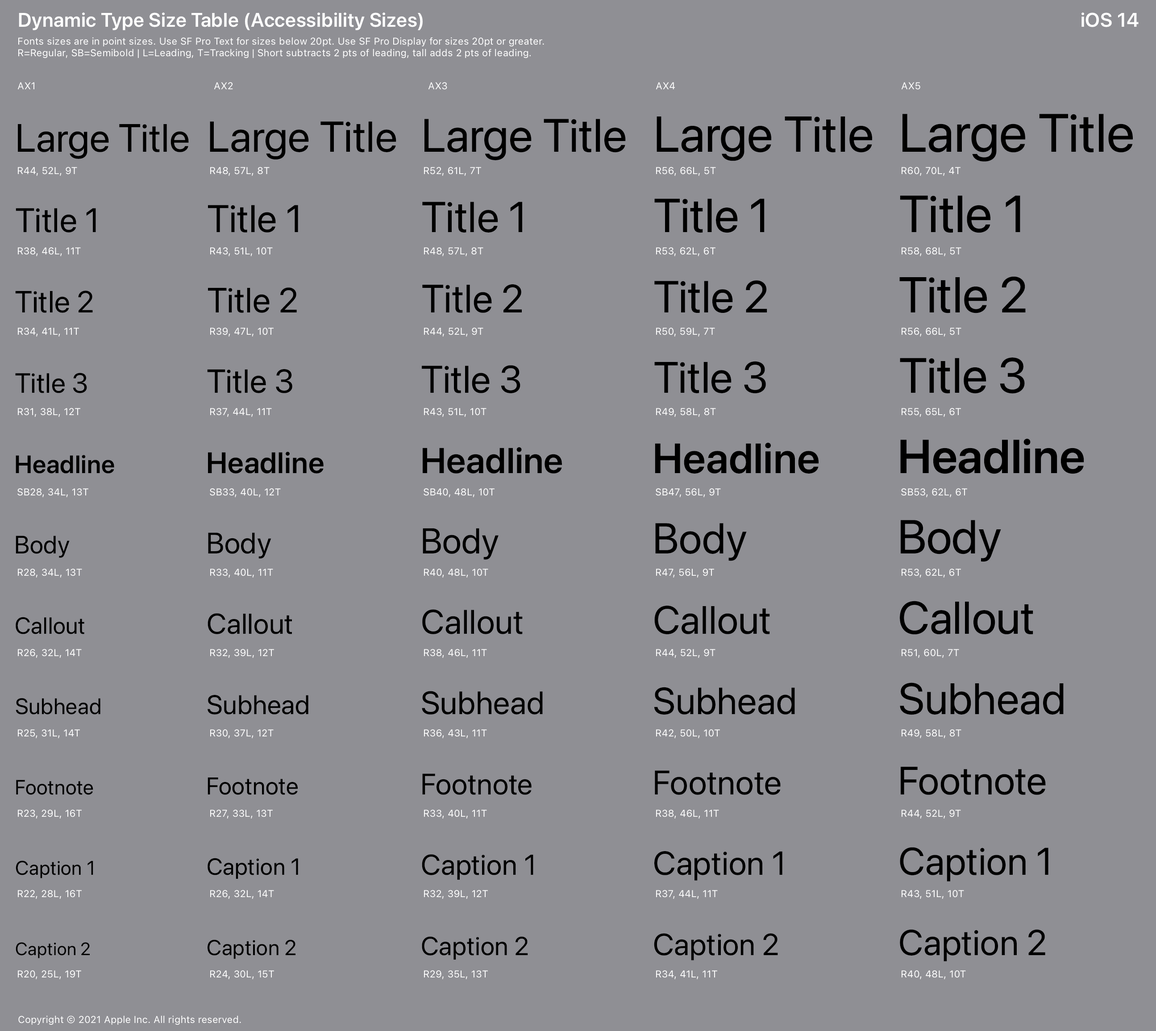
<style>
.page{position:relative;width:1156px;height:1031px;background:#8f8f94}
.page>*{position:absolute;margin:0}
.t1{font:19.6px "SFProDisplay-Semibold";letter-spacing:0.016em;color:#ffffff}
.t2{font:9.8px/11.6px "SFProText-Regular";letter-spacing:0.006em;color:#ffffff}
.t3{font:9.8px "SFProText-Regular";letter-spacing:0.013em;color:#ffffff}
.t4{font:53.6px "SFProDisplay-Regular";letter-spacing:0.004em;color:#000000}
.t5{font:39.3px "SFProDisplay-Regular";letter-spacing:0.009em;color:#000000}
.t6{font:42.9px "SFProDisplay-Regular";letter-spacing:0.008em;color:#000000}
.t7{font:46.4px "SFProDisplay-Regular";letter-spacing:0.007em;color:#000000}
.t8{font:50px "SFProDisplay-Regular";letter-spacing:0.005em;color:#000000}
.t9{font:9.8px/80.4px "SFProText-Regular";letter-spacing:0.006em;color:#ffffff}
.t10{font:51.8px "SFProDisplay-Regular";letter-spacing:0.005em;color:#000000}
.t11{font:33.9px "SFProDisplay-Regular";letter-spacing:0.011em;color:#000000}
.t12{font:38.4px "SFProDisplay-Regular";letter-spacing:0.01em;color:#000000}
.t13{font:47.3px "SFProDisplay-Regular";letter-spacing:0.006em;color:#000000}
.t14{font:44.6px "SFProDisplay-Regular";letter-spacing:0.006em;color:#000000}
.t15{font:30.4px "SFProDisplay-Regular";letter-spacing:0.011em;color:#000000}
.t16{font:34.8px "SFProDisplay-Regular";letter-spacing:0.01em;color:#000000}
.t17{font:43.8px "SFProDisplay-Regular";letter-spacing:0.008em;color:#000000}
.t18{font:49.1px "SFProDisplay-Regular";letter-spacing:0.006em;color:#000000}
.t19{font:27.7px "SFProDisplay-Regular";letter-spacing:0.012em;color:#000000}
.t20{font:33px "SFProDisplay-Regular";letter-spacing:0.011em;color:#000000}
.t21{font:35.7px "SFProDisplay-Semibold";letter-spacing:0.01em;color:#000000}
.t22{font:42px "SFProDisplay-Semibold";letter-spacing:0.009em;color:#000000}
.t23{font:47.3px "SFProDisplay-Semibold";letter-spacing:0.006em;color:#000000}
.t24{font:25px "SFProDisplay-Semibold";letter-spacing:0.013em;color:#000000}
.t25{font:29.5px "SFProDisplay-Semibold";letter-spacing:0.012em;color:#000000}
.t26{font:29.5px "SFProDisplay-Regular";letter-spacing:0.011em;color:#000000}
.t27{font:35.7px "SFProDisplay-Regular";letter-spacing:0.01em;color:#000000}
.t28{font:42.9px "SFProDisplay-Regular";letter-spacing:0.009em;color:#000000}
.t29{font:25px "SFProDisplay-Regular";letter-spacing:0.013em;color:#000000}
.t30{font:45.5px "SFProDisplay-Regular";letter-spacing:0.007em;color:#000000}
.t31{font:23.2px "SFProDisplay-Regular";letter-spacing:0.014em;color:#000000}
.t32{font:28.6px "SFProDisplay-Regular";letter-spacing:0.012em;color:#000000}
.t33{font:37.5px "SFProDisplay-Regular";letter-spacing:0.01em;color:#000000}
.t34{font:22.3px "SFProDisplay-Regular";letter-spacing:0.014em;color:#000000}
.t35{font:26.8px "SFProDisplay-Regular";letter-spacing:0.012em;color:#000000}
.t36{font:32.1px "SFProDisplay-Regular";letter-spacing:0.011em;color:#000000}
.t37{font:20.5px "SFProDisplay-Regular";letter-spacing:0.016em;color:#000000}
.t38{font:24.1px "SFProDisplay-Regular";letter-spacing:0.013em;color:#000000}
.t39{font:19.6px "SFProDisplay-Regular";letter-spacing:0.016em;color:#000000}
.t40{font:21.4px "SFProDisplay-Regular";letter-spacing:0.015em;color:#000000}
.t41{font:25.9px "SFProDisplay-Regular";letter-spacing:0.013em;color:#000000}
.t42{font:17.9px "SFProDisplay-Regular";letter-spacing:0.019em;color:#000000}
.t43{font:9.8px "SFProText-Regular";letter-spacing:0.006em;color:#ffffff}
</style>
<div class="page">
<p class="t1" style="left:19px;top:13px;width:404px;height:17px">Dynamic Type Size Table (Accessibility Sizes)</p>
<p class="t1" style="left:1082px;top:13px;width:57px;height:14px">iOS 14</p>
<p class="t2" style="left:18px;top:37px;width:526px;height:21px">Fonts sizes are in point sizes. Use SF Pro Text for sizes below 20pt. Use SF Pro Display for sizes 20pt or greater.<br>R=Regular, SB=Semibold | L=Leading, T=Tracking | Short subtracts 2 pts of leading, tall adds 2 pts of leading.</p>
<p class="t3" style="left:17px;top:82px;width:17px;height:7px">AX1</p>
<p class="t3" style="left:214px;top:82px;width:19px;height:7px">AX2</p>
<p class="t3" style="left:428px;top:82px;width:19px;height:8px">AX3</p>
<p class="t3" style="left:656px;top:82px;width:19px;height:7px">AX4</p>
<p class="t3" style="left:901px;top:82px;width:20px;height:8px">AX5</p>
<p class="t4" style="left:903px;top:114px;width:230px;height:48px">Large Title</p>
<p class="t5" style="left:18px;top:124px;width:171px;height:35px">Large Title</p>
<p class="t6" style="left:210px;top:121px;width:186px;height:39px">Large Title</p>
<p class="t7" style="left:425px;top:119px;width:201px;height:41px">Large Title</p>
<p class="t8" style="left:657px;top:117px;width:215px;height:44px">Large Title</p>
<p class="t9" style="left:17px;top:167px;width:71px;height:812px">R44, 52L, 9T<br>R38, 46L, 11T<br>R34, 41L, 11T<br>R31, 38L, 12T<br>SB28, 34L, 13T<br>R28, 34L, 13T<br>R26, 32L, 14T<br>R25, 31L, 14T<br>R23, 29L, 16T<br>R22, 28L, 16T<br>R20, 25L, 19T</p>
<p class="t9" style="left:210px;top:167px;width:71px;height:812px">R48, 57L, 8T<br>R43, 51L, 10T<br>R39, 47L, 10T<br>R37, 44L, 11T<br>SB33, 40L, 12T<br>R33, 40L, 11T<br>R32, 39L, 12T<br>R30, 37L, 12T<br>R27, 33L, 13T<br>R26, 32L, 14T<br>R24, 30L, 15T</p>
<p class="t9" style="left:424px;top:167px;width:71px;height:812px">R52, 61L, 7T<br>R48, 57L, 8T<br>R44, 52L, 9T<br>R43, 51L, 10T<br>SB40, 48L, 10T<br>R40, 48L, 10T<br>R38, 46L, 11T<br>R36, 43L, 11T<br>R33, 40L, 11T<br>R32, 39L, 12T<br>R29, 35L, 13T</p>
<p class="t9" style="left:656px;top:167px;width:65px;height:812px">R56, 66L, 5T<br>R53, 62L, 6T<br>R50, 59L, 7T<br>R49, 58L, 8T<br>SB47, 56L, 9T<br>R47, 56L, 9T<br>R44, 52L, 9T<br>R42, 50L, 10T<br>R38, 46L, 11T<br>R37, 44L, 11T<br>R34, 41L, 11T</p>
<p class="t9" style="left:901px;top:167px;width:66px;height:812px">R60, 70L, 4T<br>R58, 68L, 5T<br>R56, 66L, 5T<br>R55, 65L, 6T<br>SB53, 62L, 6T<br>R53, 62L, 6T<br>R51, 60L, 7T<br>R49, 58L, 8T<br>R44, 52L, 9T<br>R43, 51L, 10T<br>R40, 48L, 10T</p>
<p class="t10" style="left:900px;top:196px;width:121px;height:37px">Title 1</p>
<p class="t11" style="left:16px;top:208px;width:80px;height:25px">Title 1</p>
<p class="t12" style="left:208px;top:205px;width:90px;height:28px">Title 1</p>
<p class="t6" style="left:422px;top:202px;width:100px;height:31px">Title 1</p>
<p class="t13" style="left:654px;top:199px;width:111px;height:34px">Title 1</p>
<p class="t14" style="left:654px;top:280px;width:113px;height:33px">Title 2</p>
<p class="t8" style="left:900px;top:276px;width:126px;height:37px">Title 2</p>
<p class="t15" style="left:15px;top:291px;width:78px;height:22px">Title 2</p>
<p class="t16" style="left:208px;top:288px;width:89px;height:25px">Title 2</p>
<p class="t5" style="left:422px;top:284px;width:100px;height:29px">Title 2</p>
<p class="t12" style="left:422px;top:365px;width:99px;height:28px">Title 3</p>
<p class="t17" style="left:654px;top:361px;width:112px;height:33px">Title 3</p>
<p class="t18" style="left:900px;top:358px;width:125px;height:36px">Title 3</p>
<p class="t19" style="left:15px;top:373px;width:72px;height:20px">Title 3</p>
<p class="t20" style="left:207px;top:369px;width:85px;height:24px">Title 3</p>
<p class="t21" style="left:423px;top:447px;width:139px;height:27px">Headline</p>
<p class="t22" style="left:655px;top:442px;width:164px;height:32px">Headline</p>
<p class="t23" style="left:900px;top:439px;width:184px;height:35px">Headline</p>
<p class="t24" style="left:16px;top:455px;width:98px;height:19px">Headline</p>
<p class="t25" style="left:208px;top:452px;width:116px;height:22px">Headline</p>
<p class="t13" style="left:901px;top:520px;width:100px;height:42px">Body</p>
<p class="t26" style="left:208px;top:533px;width:63px;height:26px">Body</p>
<p class="t27" style="left:423px;top:528px;width:76px;height:32px">Body</p>
<p class="t28" style="left:655px;top:523px;width:92px;height:38px">Body</p>
<p class="t29" style="left:16px;top:536px;width:54px;height:22px">Body</p>
<p class="t5" style="left:654px;top:606px;width:116px;height:28px">Callout</p>
<p class="t30" style="left:900px;top:601px;width:134px;height:34px">Callout</p>
<p class="t31" style="left:16px;top:617px;width:68px;height:17px">Callout</p>
<p class="t32" style="left:208px;top:613px;width:84px;height:21px">Callout</p>
<p class="t11" style="left:422px;top:609px;width:101px;height:25px">Callout</p>
<p class="t33" style="left:654px;top:687px;width:141px;height:28px">Subhead</p>
<p class="t17" style="left:900px;top:683px;width:164px;height:32px">Subhead</p>
<p class="t34" style="left:16px;top:698px;width:84px;height:17px">Subhead</p>
<p class="t35" style="left:208px;top:695px;width:100px;height:20px">Subhead</p>
<p class="t36" style="left:422px;top:691px;width:121px;height:24px">Subhead</p>
<p class="t26" style="left:422px;top:774px;width:110px;height:21px">Footnote</p>
<p class="t11" style="left:655px;top:771px;width:126px;height:24px">Footnote</p>
<p class="t5" style="left:901px;top:767px;width:145px;height:28px">Footnote</p>
<p class="t37" style="left:16px;top:780px;width:77px;height:15px">Footnote</p>
<p class="t38" style="left:208px;top:778px;width:90px;height:17px">Footnote</p>
<p class="t32" style="left:422px;top:854px;width:111px;height:26px">Caption 1</p>
<p class="t20" style="left:654px;top:851px;width:129px;height:30px">Caption 1</p>
<p class="t12" style="left:900px;top:847px;width:149px;height:35px">Caption 1</p>
<p class="t39" style="left:16px;top:861px;width:77px;height:18px">Caption 1</p>
<p class="t31" style="left:208px;top:858px;width:90px;height:21px">Caption 1</p>
<p class="t27" style="left:900px;top:929px;width:146px;height:33px">Caption 2</p>
<p class="t40" style="left:208px;top:940px;width:88px;height:19px">Caption 2</p>
<p class="t41" style="left:422px;top:937px;width:106px;height:23px">Caption 2</p>
<p class="t15" style="left:654px;top:934px;width:124px;height:27px">Caption 2</p>
<p class="t42" style="left:16px;top:942px;width:74px;height:17px">Caption 2</p>
<p class="t43" style="left:18px;top:1016px;width:223px;height:9px">Copyright © 2021 Apple Inc. All rights reserved.</p>
</div>
